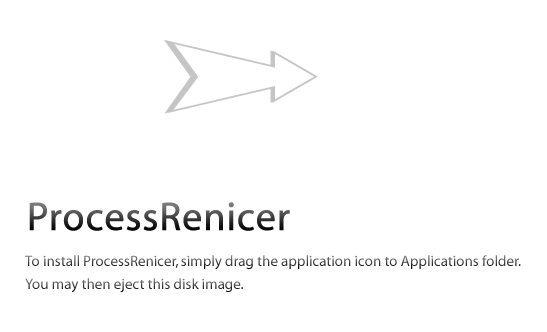
<style>
.page{position:relative;width:547px;height:332px;background:#ffffff}
.page>*{position:absolute;margin:0}
.t1{font:40px "Myriad-Roman";font-weight:bold}
.t2{font:15px "Myriad-Roman"}
</style>
<div class="page">
<p class="t1" style="left:29px;top:202px;width:261px;height:29px">ProcessRenicer</p>
<p class="t2" style="left:25px;top:255px;width:496px;height:15px">To install ProcessRenicer, simply drag the application icon to Applications folder.</p>
<p class="t2" style="left:25px;top:278px;width:218px;height:15px">You may then eject this disk image.</p>
</div>
